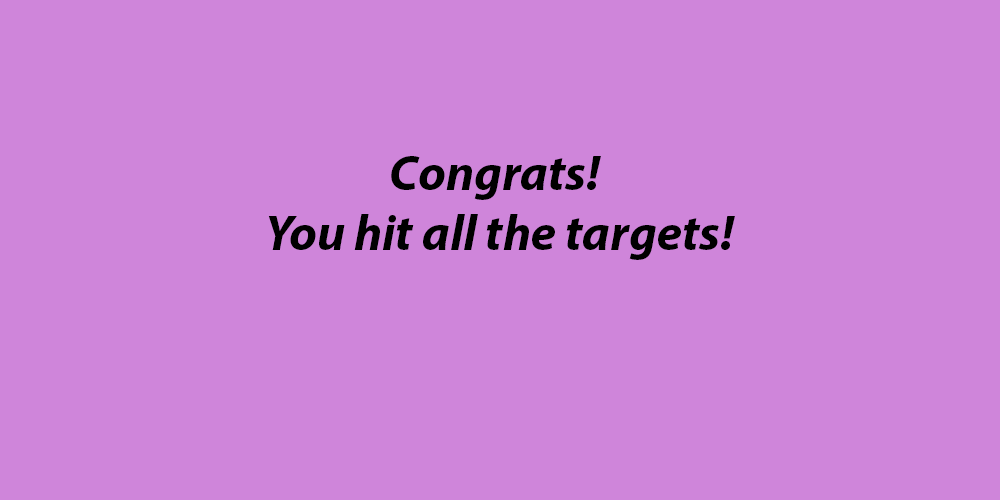
<style>
.page{position:relative;width:1000px;height:500px;background:#cf85da}
.page>*{position:absolute;margin:0}
.t1{font:50px "MyriadPro-BoldIt";color:#000000}
</style>
<div class="page">
<p class="t1" style="left:268px;top:156px;width:467px;height:104px;text-align:center">Congrats! <br>You hit all the targets!</p>
</div>
